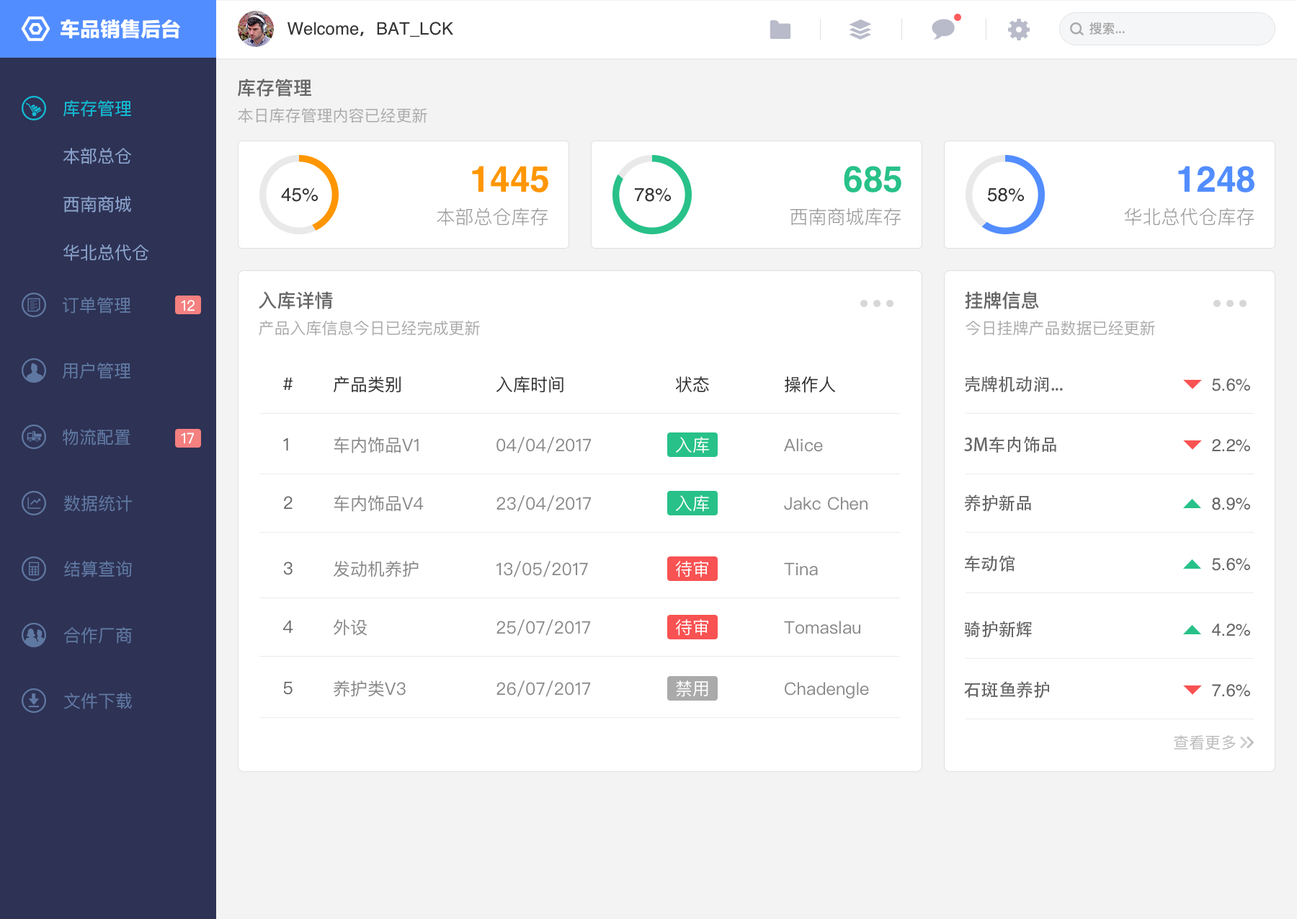
<style>
.page{position:relative;width:1297px;height:919px;background:#ffffff}
.page>*{position:absolute;margin:0}
.t1{font:20.2px "FZLTTHK--GBK1-0";color:#ffffff}
.t2{font:17.3px "Helvetica";color:#333333}
.t3{font:17.3px "AdobeHeitiStd-Regular";color:#333333}
.t4{font:13px "PingFangSC-Regular";color:#aaaaaa}
.t5{font:18.7px "PingFangSC-Medium";color:#666666}
.t6{font:17.3px "PingFangSC-Regular";color:#12bcd5}
.t7{font:15.9px "PingFangSC-Regular";color:#aaaaaa}
.t8{font:17.3px "PingFangSC-Regular";color:#8aa3cd}
.t9{font:36px "Helvetica-Bold";color:#ff9600}
.t10{font:36px "Helvetica-Bold";color:#28c189}
.t11{font:36px "Helvetica-Bold";color:#528dff}
.t12{font:18.7px "Helvetica";color:#333333}
.t13{font:18.7px "PingFangSC-Light";color:#999999}
.t14{font:17.3px "PingFangSC-Regular";color:#5f78a2}
.t15{font:14.4px "PingFangSC-Regular";color:#ffffff}
.t16{font:17.3px "PingFangSC-Regular";color:#333333}
.t17{font:17.3px "AdobeHeitiStd-Regular";color:#666666}
.t18{font:17.3px "Helvetica";color:#666666}
.t19{font:17.3px "PingFangSC-Regular";color:#666666}
.t20{font:17.3px "PingFangSC-Regular";color:#888888}
.t21{font:17.3px "PingFangSC-Regular";color:#ffffff}
.t22{font:15.9px "PingFangSC-Regular";color:#bbbbbb}
</style>
<div class="page">
<p class="t1" style="left:61px;top:19px;width:120px;height:20px">车品销售后台</p>
<p class="t2" style="left:288px;top:22px;width:165px;height:15px">Welcome<span class="t3">，</span>BAT_LCK</p>
<p class="t4" style="left:1090px;top:22px;width:35px;height:13px">搜索...</p>
<p class="t5" style="left:238px;top:79px;width:73px;height:18px">库存管理</p>
<p class="t6" style="left:63px;top:100px;width:68px;height:17px">库存管理</p>
<p class="t7" style="left:238px;top:107px;width:189px;height:16px">本日库存管理内容已经更新</p>
<p class="t8" style="left:63px;top:148px;width:68px;height:16px">本部总仓</p>
<p class="t9" style="left:472px;top:166px;width:77px;height:26px">1445</p>
<p class="t10" style="left:844px;top:166px;width:58px;height:26px">685</p>
<p class="t11" style="left:1179px;top:166px;width:76px;height:26px">1248</p>
<p class="t8" style="left:63px;top:196px;width:68px;height:17px">西南商城</p>
<p class="t12" style="left:281px;top:187px;width:38px;height:15px">45%</p>
<p class="t12" style="left:634px;top:187px;width:38px;height:15px">78%</p>
<p class="t12" style="left:988px;top:187px;width:37px;height:15px">58%</p>
<p class="t13" style="left:437px;top:208px;width:112px;height:18px">本部总仓库存</p>
<p class="t13" style="left:790px;top:208px;width:112px;height:18px">西南商城库存</p>
<p class="t13" style="left:1125px;top:208px;width:130px;height:18px">华北总代仓库存</p>
<p class="t8" style="left:63px;top:244px;width:85px;height:17px">华北总代仓</p>
<p class="t5" style="left:259px;top:291px;width:74px;height:18px">入库详情</p>
<p class="t5" style="left:965px;top:291px;width:74px;height:18px">挂牌信息</p>
<p class="t14" style="left:63px;top:297px;width:67px;height:17px">订单管理</p>
<p class="t15" style="left:181px;top:300px;width:14px;height:11px">12</p>
<p class="t7" style="left:259px;top:320px;width:221px;height:16px">产品入库信息今日已经完成更新</p>
<p class="t7" style="left:966px;top:320px;width:189px;height:16px">今日挂牌产品数据已经更新</p>
<p class="t14" style="left:63px;top:363px;width:67px;height:16px">用户管理</p>
<p class="t16" style="left:283px;top:377px;width:10px;height:13px">#</p>
<p class="t16" style="left:334px;top:376px;width:67px;height:17px">产品类别</p>
<p class="t16" style="left:497px;top:376px;width:67px;height:17px">入库时间</p>
<p class="t16" style="left:676px;top:376px;width:33px;height:17px">状态</p>
<p class="t16" style="left:785px;top:376px;width:50px;height:17px">操作人</p>
<p class="t17" style="left:965px;top:376px;width:98px;height:17px">壳牌机动润...</p>
<p class="t18" style="left:1212px;top:378px;width:39px;height:13px">5.6%</p>
<p class="t14" style="left:63px;top:429px;width:67px;height:16px">物流配置</p>
<p class="t15" style="left:181px;top:432px;width:14px;height:12px">17</p>
<p class="t19" style="left:283px;top:438px;width:5px;height:13px">1</p>
<p class="t20" style="left:334px;top:437px;width:85px;height:16px">车内饰品V1</p>
<p class="t20" style="left:497px;top:437px;width:95px;height:16px">04/04/2017</p>
<p class="t21" style="left:676px;top:437px;width:33px;height:16px">入库</p>
<p class="t17" style="left:964px;top:436px;width:93px;height:17px">3M车内饰品</p>
<p class="t20" style="left:784px;top:438px;width:39px;height:14px">Alice</p>
<p class="t18" style="left:1212px;top:439px;width:39px;height:13px">2.2%</p>
<p class="t14" style="left:64px;top:495px;width:68px;height:17px">数据统计</p>
<p class="t19" style="left:284px;top:496px;width:9px;height:13px">2</p>
<p class="t20" style="left:334px;top:495px;width:90px;height:17px">车内饰品V4</p>
<p class="t20" style="left:497px;top:495px;width:95px;height:17px">23/04/2017</p>
<p class="t21" style="left:676px;top:495px;width:33px;height:17px">入库</p>
<p class="t20" style="left:784px;top:497px;width:84px;height:13px">Jakc Chen</p>
<p class="t17" style="left:964px;top:494px;width:67px;height:18px">养护新品</p>
<p class="t18" style="left:1212px;top:497px;width:39px;height:13px">8.9%</p>
<p class="t17" style="left:965px;top:555px;width:50px;height:17px">车动馆</p>
<p class="t18" style="left:1212px;top:558px;width:39px;height:13px">5.6%</p>
<p class="t14" style="left:64px;top:561px;width:68px;height:16px">结算查询</p>
<p class="t19" style="left:283px;top:562px;width:10px;height:13px">3</p>
<p class="t20" style="left:334px;top:561px;width:85px;height:16px">发动机养护</p>
<p class="t20" style="left:497px;top:561px;width:91px;height:16px">13/05/2017</p>
<p class="t21" style="left:676px;top:561px;width:33px;height:16px">待审</p>
<p class="t20" style="left:784px;top:562px;width:34px;height:14px">Tina</p>
<p class="t14" style="left:63px;top:627px;width:69px;height:17px">合作厂商</p>
<p class="t19" style="left:283px;top:620px;width:10px;height:13px">4</p>
<p class="t20" style="left:334px;top:619px;width:34px;height:17px">外设</p>
<p class="t20" style="left:497px;top:619px;width:94px;height:17px">25/07/2017</p>
<p class="t21" style="left:676px;top:619px;width:33px;height:17px">待审</p>
<p class="t20" style="left:784px;top:621px;width:77px;height:13px">Tomaslau</p>
<p class="t17" style="left:964px;top:621px;width:68px;height:17px">骑护新辉</p>
<p class="t18" style="left:1212px;top:624px;width:39px;height:12px">4.2%</p>
<p class="t19" style="left:283px;top:681px;width:10px;height:14px">5</p>
<p class="t20" style="left:334px;top:680px;width:72px;height:17px">养护类V3</p>
<p class="t20" style="left:497px;top:680px;width:94px;height:17px">26/07/2017</p>
<p class="t21" style="left:676px;top:680px;width:33px;height:17px">禁用</p>
<p class="t20" style="left:785px;top:682px;width:84px;height:16px">Chadengle</p>
<p class="t17" style="left:964px;top:681px;width:86px;height:17px">石斑鱼养护</p>
<p class="t18" style="left:1212px;top:684px;width:39px;height:13px">7.6%</p>
<p class="t14" style="left:64px;top:693px;width:68px;height:16px">文件下载</p>
<p class="t22" style="left:1174px;top:735px;width:62px;height:15px">查看更多</p>
</div>
